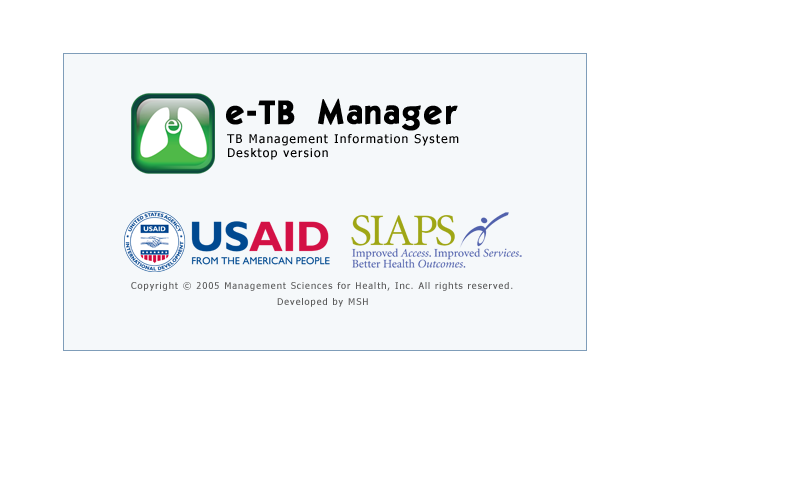
<style>
.page{position:relative;width:802px;height:500px;background:#ffffff}
.page>*{position:absolute;margin:0}
.t1{font:32px "Elegance";letter-spacing:0.1em;color:#000000;font-weight:bold}
.t2{font:12px "Tahoma";letter-spacing:0.1em;color:#000000}
.t3{font:9.3px "Tahoma";letter-spacing:0.1em;color:#5d5d5d}
</style>
<div class="page">
<p class="t1" style="left:226px;top:98px;width:232px;height:33px">e-TB Manager</p>
<p class="t2" style="left:227px;top:134px;width:232px;height:26px">TB Management Information System<br>Desktop version</p>
<p class="t3" style="left:131px;top:282px;width:382px;height:9px">Copyright © 2005 Management Sciences for Health, Inc. All rights reserved.</p>
<p class="t3" style="left:277px;top:298px;width:91px;height:9px">Developed by MSH</p>
</div>
